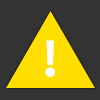
<style>
.page{position:relative;width:100px;height:100px;background:#333333}
.page>*{position:absolute;margin:0}
.t1{font:41.7px "LeagueSpartan-Bold";letter-spacing:0.004em;color:#ffffff}
</style>
<div class="page">
<p class="t1" style="left:45px;top:40px;width:10px;height:37px">!</p>
</div>
